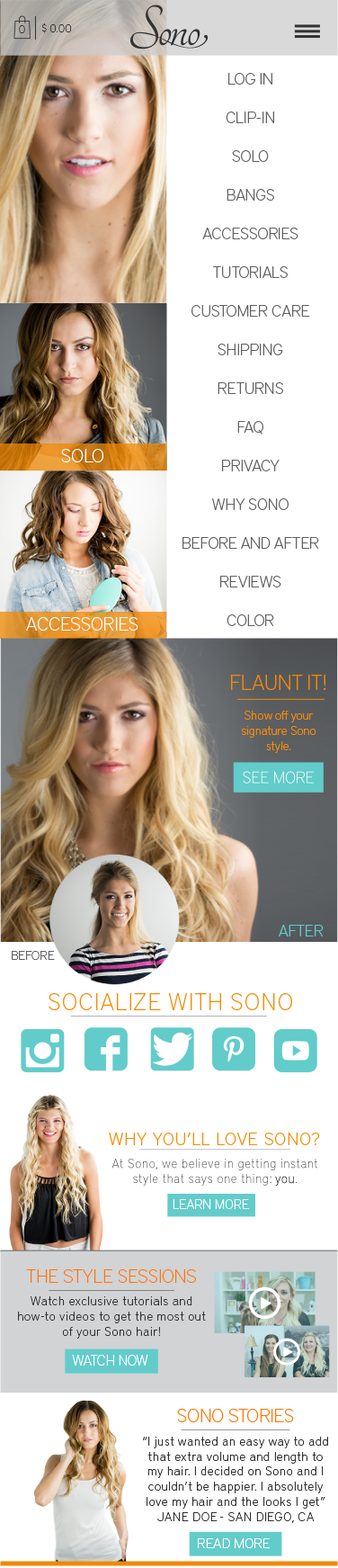
<style>
.page{position:relative;width:338px;height:1568px;background:#ffffff}
.page>*{position:absolute;margin:0}
.t1{font:11.2px "DistrictPro-Thin";color:#323232}
.t2{font:16.2px/38.7px "DistrictPro-Thin";color:#5f6062}
.t3{font:18.9px "DistrictPro-Thin";color:#ffffff}
.t4{font:12.6px "DistrictPro-Thin";color:#f38b00}
.t5{font:21.6px "DistrictPro-Thin";color:#f38b00}
.t6{font:16.2px "DistrictPro-Thin";color:#65cbc9}
.t7{font:12.6px "DistrictPro-Thin";color:#5f6062}
.t8{font:23.5px "DistrictPro-Thin";letter-spacing:0.05em;color:#f38b00}
.t9{font:17.8px "DistrictPro-Thin";letter-spacing:0.05em;color:#f38b00}
.t10{font:13.5px "DistrictPro-Thin";color:#ffffff}
.t11{font:18.9px "DistrictPro-Thin";color:#ff7400}
.t12{font:12.6px "DistrictPro-Thin";letter-spacing:0.05em;color:#323232}
.t13{font:14.3px "DistrictPro-Thin";color:#ffffff}
.t14{font:14.2px "DistrictPro-Thin";color:#ffffff}
</style>
<div class="page">
<p class="t1" style="left:19px;top:25px;width:6px;height:8px">0</p>
<p class="t1" style="left:41px;top:22px;width:31px;height:11px">$ 0.00</p>
<p class="t2" style="left:183px;top:73px;width:136px;height:553px;text-align:center">LOG IN<br>CLIP-IN<br>SOLO<br>BANGS<br>ACCESSORIES<br>TUTORIALS<br>CUSTOMER CARE<br>SHIPPING<br>RETURNS<br>FAQ<br>PRIVACY<br>WHY SONO<br>BEFORE AND AFTER<br>REVIEWS<br>COLOR</p>
<p class="t3" style="left:61px;top:449px;width:42px;height:13px">SOLO</p>
<p class="t3" style="left:26px;top:617px;width:113px;height:14px">ACCESSORIES</p>
<p class="t4" style="left:231px;top:675px;width:96px;height:78px;text-align:center"><span class="t5">FLAUNT IT!<br></span><br>Show off your signature Sono style.</p>
<p class="t6" style="left:279px;top:925px;width:45px;height:11px">AFTER</p>
<p class="t7" style="left:12px;top:951px;width:43px;height:9px">BEFORE</p>
<p class="t8" style="left:49px;top:993px;width:243px;height:17px">SOCIALIZE WITH SONO</p>
<p class="t9" style="left:109px;top:1133px;width:211px;height:12px">WHY YOU’LL LOVE SONO?</p>
<p class="t10" style="left:173px;top:1199px;width:76px;height:10px">LEARN MORE</p>
<p class="t11" style="left:26px;top:1269px;width:170px;height:14px">THE STYLE SESSIONS</p>
<p class="t12" style="left:18px;top:1296px;width:188px;height:43px;text-align:center">Watch exclusive tutorials and how-to videos to get the most out of your Sono hair!</p>
<p class="t13" style="left:72px;top:1355px;width:76px;height:11px">WATCH NOW</p>
<p class="t11" style="left:177px;top:1409px;width:117px;height:13px">SONO STORIES</p>
<p class="t12" style="left:143px;top:1437px;width:185px;height:86px;text-align:center">“I just wanted an easy way to add that extra volume and length to my hair. I decided on Sono and I couldn’t be happier. I absolutely love my hair and the looks I get”<br>JANE DOE - SAN DIEGO, CA</p>
<p class="t14" style="left:198px;top:1538px;width:72px;height:10px">READ MORE</p>
</div>
